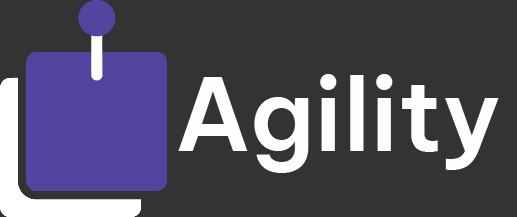
<style>
.page{position:relative;width:517px;height:217px;background:#333333}
.page>*{position:absolute;margin:0}
.t1{font:100px "BeVietnamPro-SemiBold";color:#fefefe}
</style>
<div class="page">
<p class="t1" style="left:178px;top:74px;width:321px;height:99px">Agility</p>
</div>
